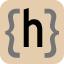
<style>
.page{position:relative;width:64px;height:64px;background:#e4ccac}
.page>*{position:absolute;margin:0}
.t1{font:52px "TrebuchetMS-Bold";letter-spacing:0.025em;color:#757575;scale:0.77 1}
.t2{font:52px "TrebuchetMS-Bold";letter-spacing:0.025em;color:#000000;scale:0.77 1}
</style>
<div class="page">
<p class="t1" style="left:5px;top:8px;width:54px;height:50px">{<span class="t2">h</span>}</p>
</div>
